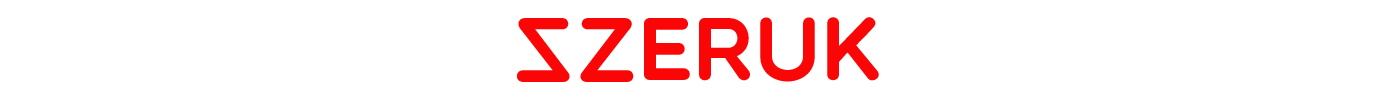
<style>
.page{position:relative;width:1400px;height:100px;background:#ffffff}
.page>*{position:absolute;margin:0}
.t1{font:90px "Multicolore";color:#fb0606}
.t2{font:92.3px "Multicolore";color:#fb0606}
</style>
<div class="page">
<p class="t1" style="left:644px;top:17px;width:235px;height:65px">eruk</p>
<p class="t2" style="left:517px;top:18px;width:53px;height:64px;rotate:180deg">Z</p>
<p class="t2" style="left:580px;top:18px;width:54px;height:64px">Z</p>
</div>
